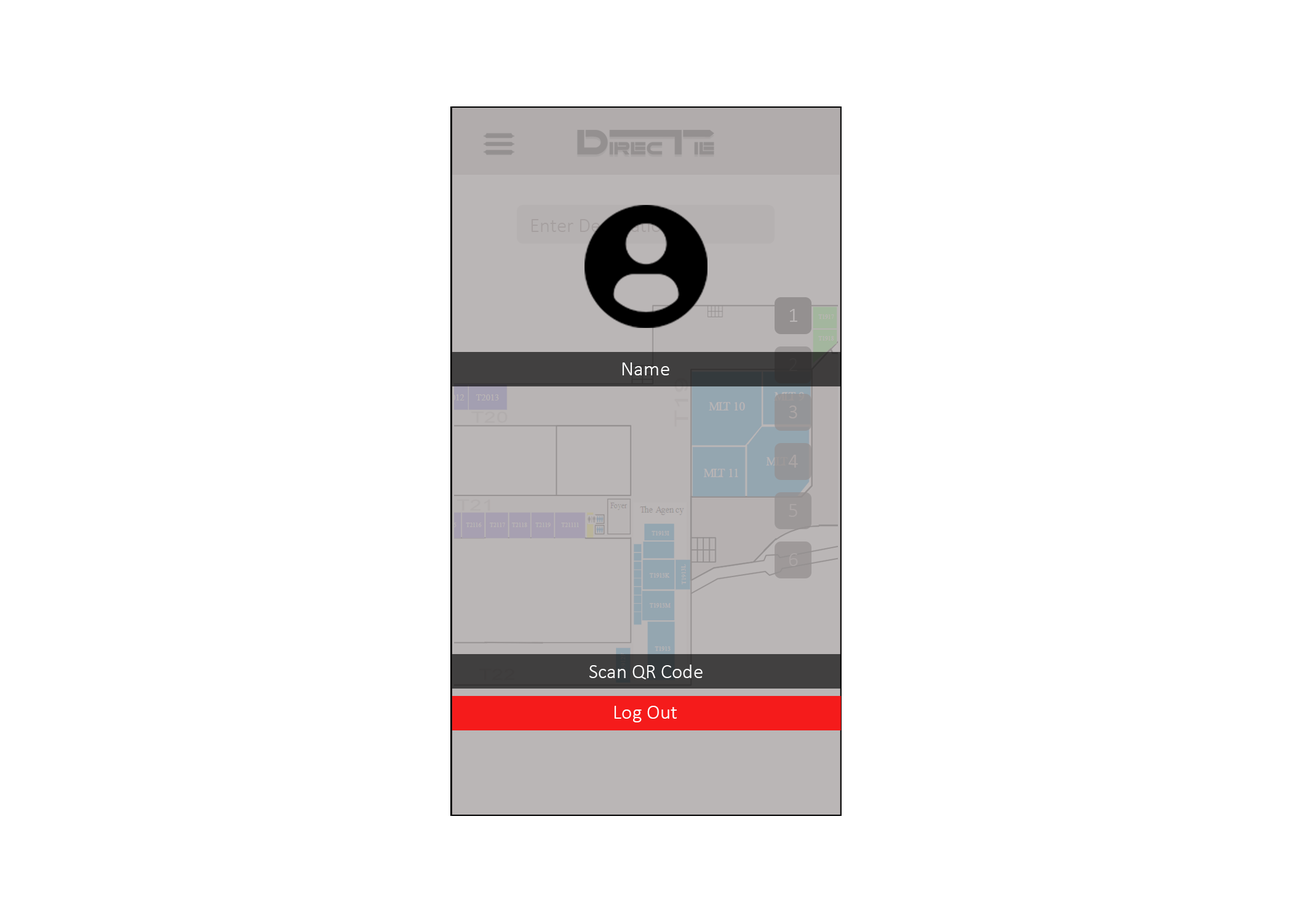
<style>
.page{position:relative;width:1292px;height:923px;background:#ffffff}
.page>*{position:absolute;margin:0}
.t1{font:20.5px "Calibri-Light";color:#bab6b6}
.t2{font:20.5px "Calibri-Light";color:#fefefe}
.t3{font:20.5px "Calibri-Light";color:#3c3a3a}
.t4{font:20.5px "Calibri-Light";color:#999191}
</style>
<div class="page">
<p class="t1" style="left:790px;top:309px;width:7px;height:13px">1</p>
<p class="t2" style="left:622px;top:362px;width:47px;height:13px">Name</p>
<p class="t3" style="left:789px;top:358px;width:8px;height:13px">2</p>
<p class="t4" style="left:789px;top:405px;width:8px;height:13px">3</p>
<p class="t4" style="left:788px;top:455px;width:10px;height:13px">4</p>
<p class="t4" style="left:789px;top:504px;width:8px;height:13px">5</p>
<p class="t4" style="left:789px;top:553px;width:9px;height:13px">6</p>
<p class="t2" style="left:589px;top:664px;width:114px;height:15px">Scan QR Code</p>
<p class="t2" style="left:614px;top:706px;width:63px;height:16px">Log Out</p>
</div>
